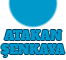
<style>
.page{position:relative;width:66px;height:60px;background:#0099cc}
.page>*{position:absolute;margin:0}
.t1{font:12px "AlfaSlabOne-Regular";color:#0099cc}
</style>
<div class="page">
<p class="t1" style="left:1px;top:30px;width:64px;height:27px;text-align:center">ATAKAN<br>ŞENKAYA</p>
</div>
